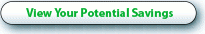
<style>
.page{position:relative;width:205px;height:34px;background:#fefffc}
.page>*{position:absolute;margin:0}
.t1{font:12px "MyriadPro-Bold";color:#06b132}
</style>
<div class="page">
<p class="t1" style="left:26px;top:8px;width:147px;height:11px">View Your Potential Savings</p>
</div>
